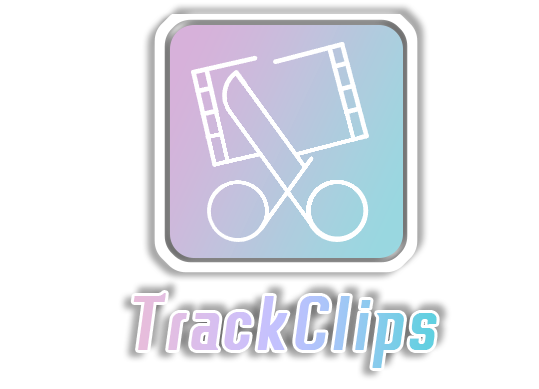
<style>
.page{position:relative;width:539px;height:389px;background:#ffffff}
.page>*{position:absolute;margin:0}
.t1{font:60px "kuaikanshijieti";letter-spacing:0.05em;font-weight:bold}
</style>
<div class="page">
<p class="t1" style="left:133px;top:293px;width:304px;height:75px">TrackClips</p>
</div>
